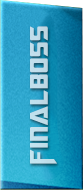
<style>
.page{position:relative;width:83px;height:190px}
.page>*{position:absolute;margin:0}
.t1{font:25.2px "Megatron";color:#c1deeb}
</style>
<div class="page">
<p class="t1" style="left:30px;top:26px;width:27px;height:138px;rotate:-90deg">Finalboss</p>
</div>
